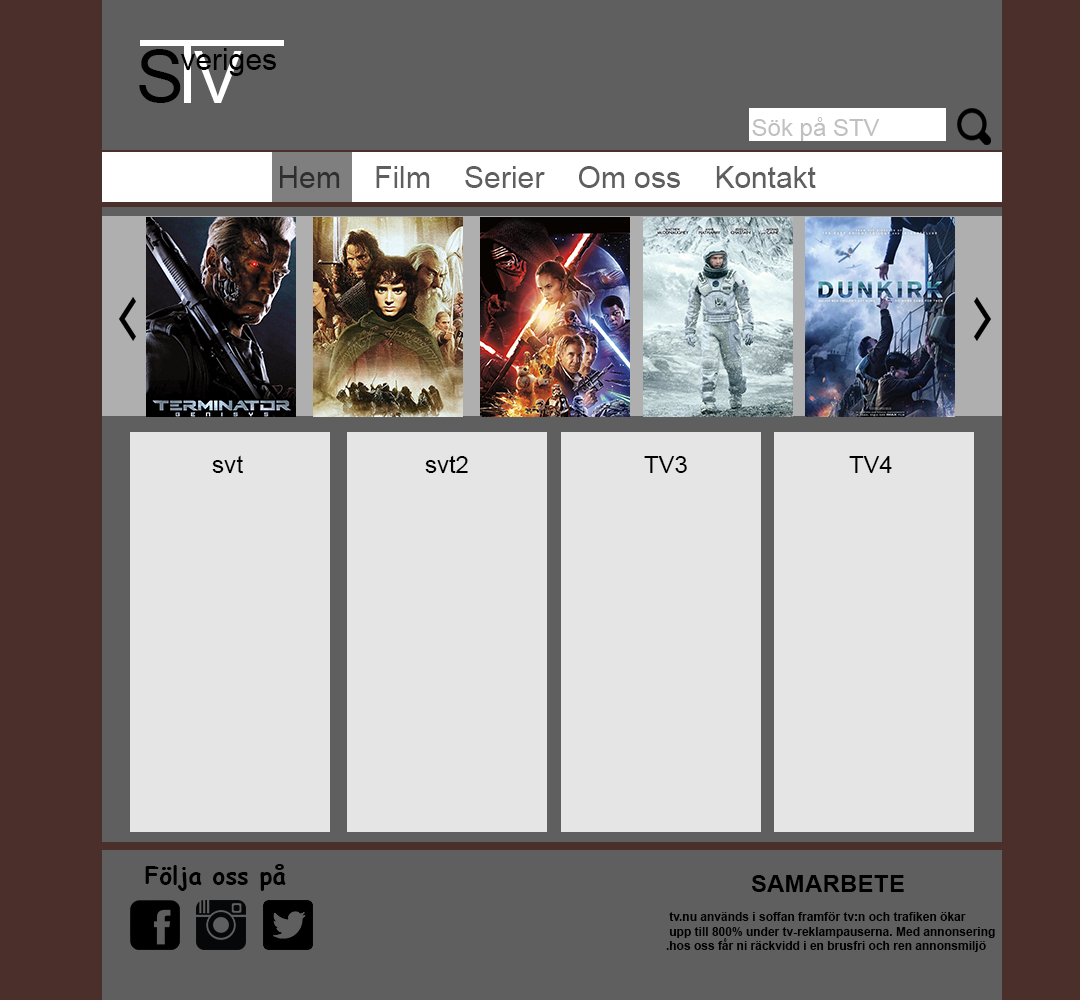
<style>
.page{position:relative;width:1080px;height:1000px;background:#605f5f}
.page>*{position:absolute;margin:0}
.t1{font:72px "ArialMT";color:#010101}
.t2{font:30px "ArialMT";color:#000000}
.t3{font:72px "ArialMT";color:#ffffff}
.t4{font:24px "ArialMT";color:#c0c0c0}
.t5{font:30px "ArialMT";color:#605f5f}
.t6{font:24px "ArialMT";color:#000000}
.t7{font:24.3px "ComicSansMS-Bold";color:#000000}
.t8{font:24.3px "Arial-BoldMT";color:#000000}
.t9{font:12px "Arial-BoldMT";color:#000000}
</style>
<div class="page">
<p class="t1" style="left:139px;top:49px;width:42px;height:54px">S</p>
<p class="t2" style="left:181px;top:48px;width:95px;height:28px">veriges</p>
<p class="t3" style="left:194px;top:51px;width:48px;height:52px">V</p>
<p class="t4" style="left:752px;top:117px;width:128px;height:24px">Sök på STV</p>
<p class="t5" style="left:280px;top:166px;width:536px;height:22px">Hem    Film    Serier    Om oss    Kontakt</p>
<p class="t6" style="left:212px;top:455px;width:31px;height:18px">svt</p>
<p class="t6" style="left:425px;top:455px;width:43px;height:18px">svt2</p>
<p class="t6" style="left:644px;top:456px;width:43px;height:17px">TV3</p>
<p class="t6" style="left:849px;top:456px;width:43px;height:17px">TV4</p>
<p class="t7" style="left:145px;top:864px;width:141px;height:27px">Följa oss på</p>
<p class="t8" style="left:751px;top:875px;width:153px;height:17px">SAMARBETE</p>
<p class="t9" style="left:666px;top:912px;width:329px;height:40px;text-align:right">tv.nu används i soffan framför tv:n och trafiken ökar <br>upp till 800% under tv-reklampauserna. Med annonsering <br>hos oss får ni räckvidd i en brusfri och ren annonsmiljö.</p>
</div>
